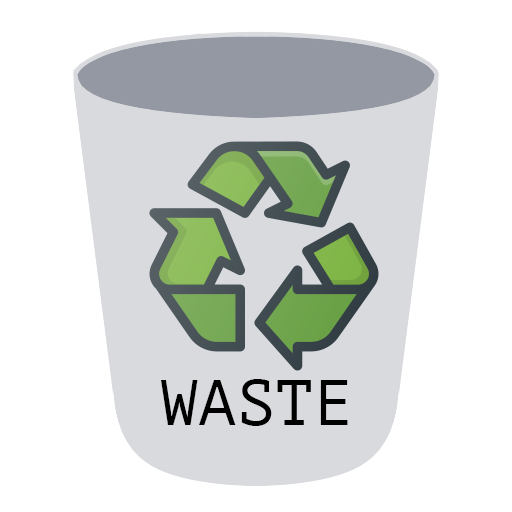
<style>
.page{position:relative;width:512px;height:512px;background:#ffffff}
.page>*{position:absolute;margin:0}
.t1{font:64px "PTMono-Regular";color:#000000}
</style>
<div class="page">
<p class="t1" style="left:161px;top:379px;width:187px;height:47px">WASTE</p>
</div>
